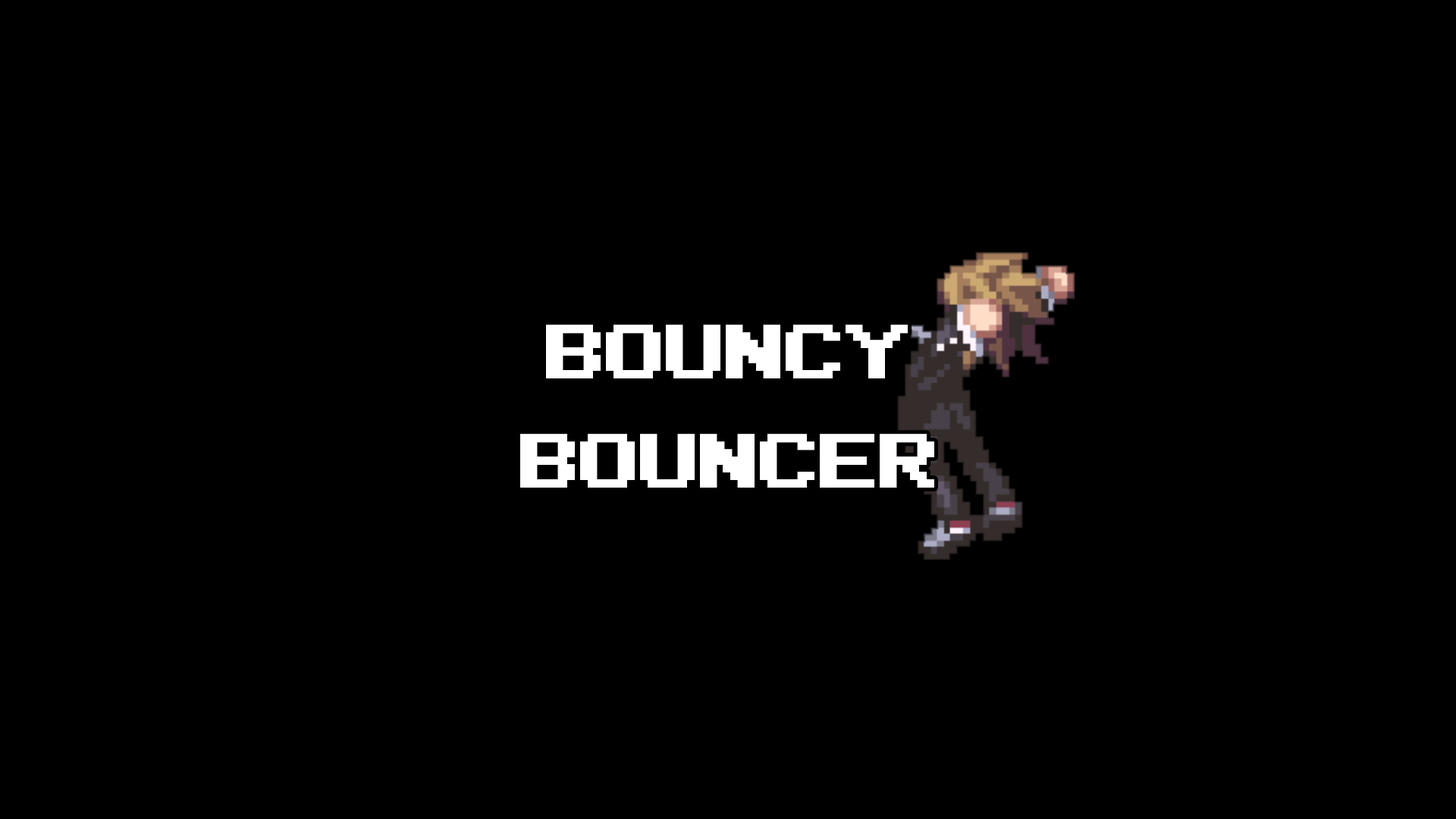
<style>
.page{position:relative;width:1456px;height:819px;background:#000000}
.page>*{position:absolute;margin:0}
.t1{font:60.5px/108.8px "Pixel-Sans-Serif";color:#ffffff;font-weight:bold}
</style>
<div class="page">
<p class="t1" style="left:520px;top:325px;width:414px;height:163px;text-align:center">BOUNCY<br>BOUNCER</p>
</div>
